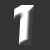
<style>
.page{position:relative;width:50px;height:50px;background:#333333}
.page>*{position:absolute;margin:0}
.t1{font:60px "ErasITC-Bold"}
</style>
<div class="page">
<p class="t1" style="left:13px;top:5px;width:21px;height:40px">1</p>
</div>
